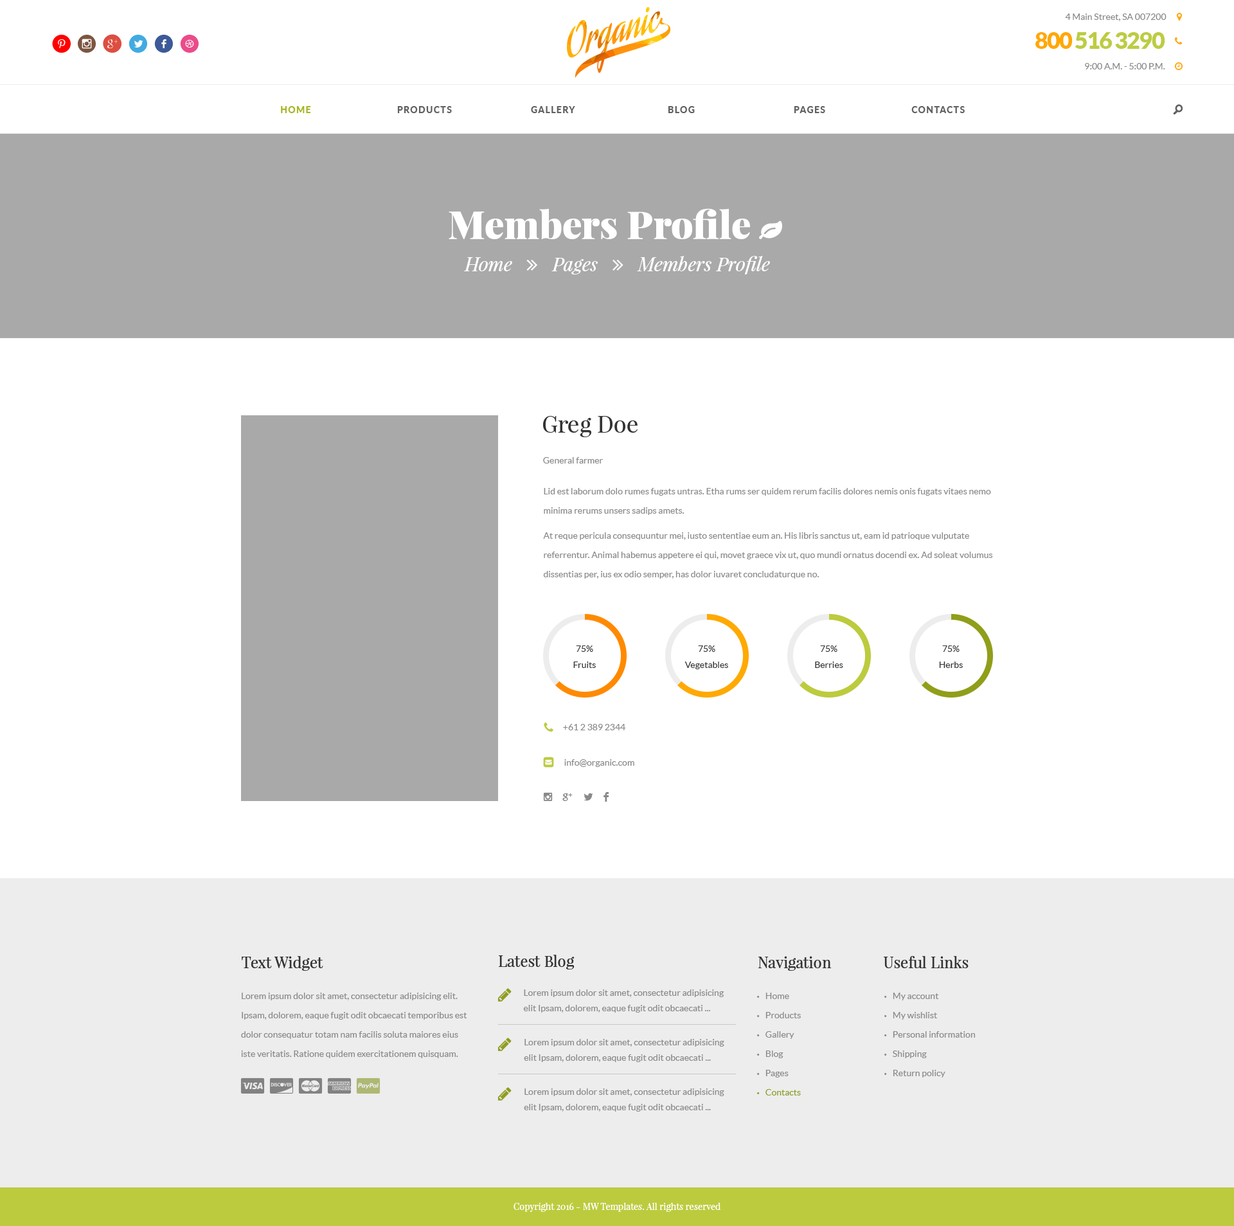
<style>
.page{position:relative;width:1234px;height:1226px;background:#ffffff}
.page>*{position:absolute;margin:0}
.t1{font:9px "Lato-Regular";color:#898989}
.t2{font:25.7px "SocialicoPlus";letter-spacing:0.2em;color:#ff0000}
.t3{font:25.7px "SocialicoPlus";letter-spacing:0.2em;color:#7c5641}
.t4{font:25.7px "SocialicoPlus";letter-spacing:0.2em;color:#dd4e41}
.t5{font:25.7px "Socialico";letter-spacing:0.2em;color:#41abe1}
.t6{font:25.7px "Socialico";letter-spacing:0.2em;color:#3d5a98}
.t7{font:25.7px "Socialico";letter-spacing:0.2em;color:#ea4c89}
.t8{font:23.1px "Lato-Black";letter-spacing:-0.05em;color:#bdcc41}
.t9{font:23.1px "Lato-Black";letter-spacing:-0.05em;color:#ffa800}
.t10{font:9px "Lato-Heavy";letter-spacing:0.1em;color:#a6b525;text-transform:uppercase}
.t11{font:9px "Lato-Heavy";letter-spacing:0.1em;color:#606060;text-transform:uppercase}
.t12{font:19.3px "SocialicoPlus";color:#606060;text-transform:uppercase}
.t13{font:23.1px "PlayfairDisplay-Regular";color:#333333}
.t14{font:9px/19.3px "Lato-Regular";color:#898989}
.t15{font:9px "Lato-Regular";color:#333333}
.t16{font:15.4px "SocialicoPlus";letter-spacing:0.6em;color:#898989;text-transform:uppercase}
.t17{font:15.4px "Socialico";letter-spacing:0.6em;color:#898989;text-transform:uppercase}
.t18{font:15.4px "PlayfairDisplay-Regular";color:#333333}
.t19{font:9px/15.4px "Lato-Regular";color:#898989}
.t20{font:9px/19.3px "MyriadPro-Regular";color:#898989;text-transform:uppercase}
.t21{font:9px/19.3px "MyriadPro-Regular";color:#909e1a;text-transform:uppercase}
.t22{font:9px/19.3px "Lato-Regular";color:#909e1a}
.t23{font:9px "PlayfairDisplay-Regular";color:#ffffff}
</style>
<div class="page">
<p class="t1" style="left:1065px;top:14px;width:102px;height:7px">4 Main Street, SA 007200</p>
<p class="t2" style="left:52px;top:34px;width:147px;height:19px">p<span class="t3">i</span><span class="t4">h</span><span class="t5">l</span><span class="t6">f</span><span class="t7">d</span></p>
<p class="t8" style="left:1036px;top:32px;width:130px;height:17px"><span class="t9">800</span> 516 3290</p>
<p class="t1" style="left:1085px;top:63px;width:81px;height:6px">9:00 A.M. - 5:00 P.M.</p>
<p class="t10" style="left:281px;top:106px;width:30px;height:7px">Home</p>
<p class="t11" style="left:397px;top:106px;width:55px;height:7px">Products</p>
<p class="t11" style="left:531px;top:106px;width:44px;height:7px">Gallery</p>
<p class="t11" style="left:668px;top:106px;width:27px;height:7px">Blog</p>
<p class="t11" style="left:794px;top:106px;width:31px;height:7px">Pages</p>
<p class="t11" style="left:912px;top:106px;width:53px;height:7px">Contacts</p>
<p class="t12" style="left:1173px;top:104px;width:11px;height:10px">o</p>
<p class="t13" style="left:543px;top:416px;width:95px;height:21px">Greg Doe</p>
<p class="t1" style="left:543px;top:457px;width:60px;height:7px">General farmer</p>
<p class="t14" style="left:543px;top:488px;width:450px;height:91px">Lid est laborum dolo rumes fugats untras. Etha rums ser quidem rerum facilis dolores nemis onis fugats vitaes nemo minima rerums unsers sadips amets.<br>At reque pericula consequuntur mei, iusto sententiae eum an. His libris sanctus ut, eam id patrioque vulputate referrentur. Animal habemus appetere ei qui, movet graece vix ut, quo mundi ornatus docendi ex. Ad soleat volumus dissentias per, ius ex odio semper, has dolor iuvaret concludaturque no.</p>
<p class="t15" style="left:573px;top:645px;width:23px;height:23px;text-align:center">75%<br>Fruits</p>
<p class="t15" style="left:685px;top:645px;width:43px;height:24px;text-align:center">75%<br>Vegetables</p>
<p class="t15" style="left:815px;top:645px;width:28px;height:23px;text-align:center">75%<br>Berries</p>
<p class="t15" style="left:939px;top:645px;width:24px;height:23px;text-align:center">75%<br>Herbs</p>
<p class="t1" style="left:563px;top:724px;width:63px;height:6px">+61 2 389 2344</p>
<p class="t1" style="left:564px;top:759px;width:70px;height:8px">info@organic.com</p>
<p class="t16" style="left:543px;top:792px;width:66px;height:10px">ih<span class="t17">lf</span></p>
<p class="t18" style="left:242px;top:956px;width:81px;height:15px">Text Widget</p>
<p class="t18" style="left:499px;top:955px;width:76px;height:14px">Latest Blog</p>
<p class="t18" style="left:759px;top:956px;width:73px;height:15px">Navigation</p>
<p class="t18" style="left:884px;top:956px;width:85px;height:12px">Useful Links</p>
<p class="t19" style="left:523px;top:989px;width:201px;height:24px">Lorem ipsum dolor sit amet, consectetur adipisicing elit Ipsam, dolorem, eaque fugit odit obcaecati ...</p>
<p class="t14" style="left:241px;top:993px;width:226px;height:65px">Lorem ipsum dolor sit amet, consectetur adipisicing elit. Ipsam, dolorem, eaque fugit odit obcaecati temporibus est dolor consequatur totam nam facilis soluta maiores eius iste veritatis. Ratione quidem exercitationem quisquam.</p>
<p class="t14" style="left:757px;top:993px;width:44px;height:102px"><span class="t20">•   </span>Home<br><span class="t20">•   </span>Products<br><span class="t20">•   </span>Gallery<br><span class="t20">•   </span>Blog<br><span class="t20">•   </span>Pages<br><span class="t21">•   </span><span class="t22">Contacts</span></p>
<p class="t14" style="left:885px;top:993px;width:90px;height:84px"><span class="t20">•   </span>My account<br><span class="t20">•   </span>My wishlist<br><span class="t20">•   </span>Personal information<br><span class="t20">•   </span>Shipping<br><span class="t20">•   </span>Return policy</p>
<p class="t19" style="left:524px;top:1039px;width:200px;height:23px">Lorem ipsum dolor sit amet, consectetur adipisicing elit Ipsam, dolorem, eaque fugit odit obcaecati ...</p>
<p class="t19" style="left:524px;top:1088px;width:200px;height:24px">Lorem ipsum dolor sit amet, consectetur adipisicing elit Ipsam, dolorem, eaque fugit odit obcaecati ...</p>
<p class="t23" style="left:514px;top:1202px;width:207px;height:10px">Copyright 2016 - MW Templates. All rights reserved</p>
</div>
